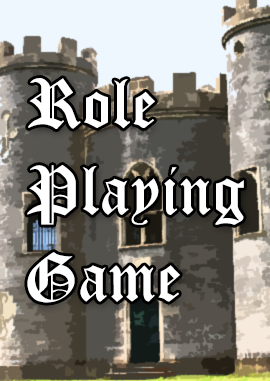
<style>
.page{position:relative;width:270px;height:381px}
.page>*{position:absolute;margin:0}
.t1{font:72.3px "CloisterBlack-Light";color:#ffffff}
</style>
<div class="page">
<p class="t1" style="left:27px;top:78px;width:217px;height:225px">Role<br>Playing<br>Game</p>
</div>
